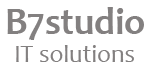
<style>
.page{position:relative;width:150px;height:75px;background:#ffffff}
.page>*{position:absolute;margin:0}
.t1{font:37.5px "Candara-Bold";color:#838080}
.t2{font:25px "Candara";color:#838080}
</style>
<div class="page">
<p class="t1" style="left:7px;top:7px;width:137px;height:33px">B7studio</p>
<p class="t2" style="left:16px;top:45px;width:118px;height:17px">IT solutions</p>
</div>
